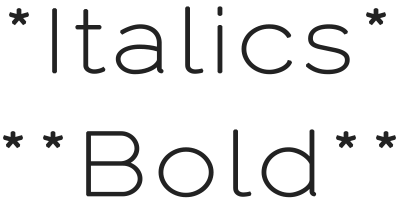
<style>
.page{position:relative;width:400px;height:208px;background:#ffffff}
.page>*{position:absolute;margin:0}
.t1{font:88.2px "Raleway-Thin";letter-spacing:0.05em;color:#222222;font-weight:bold;scale:1.2 1}
</style>
<div class="page">
<p class="t1" style="left:8px;top:6px;width:379px;height:69px">*Italics*</p>
<p class="t1" style="left:2px;top:129px;width:395px;height:69px">**Bold**</p>
</div>
